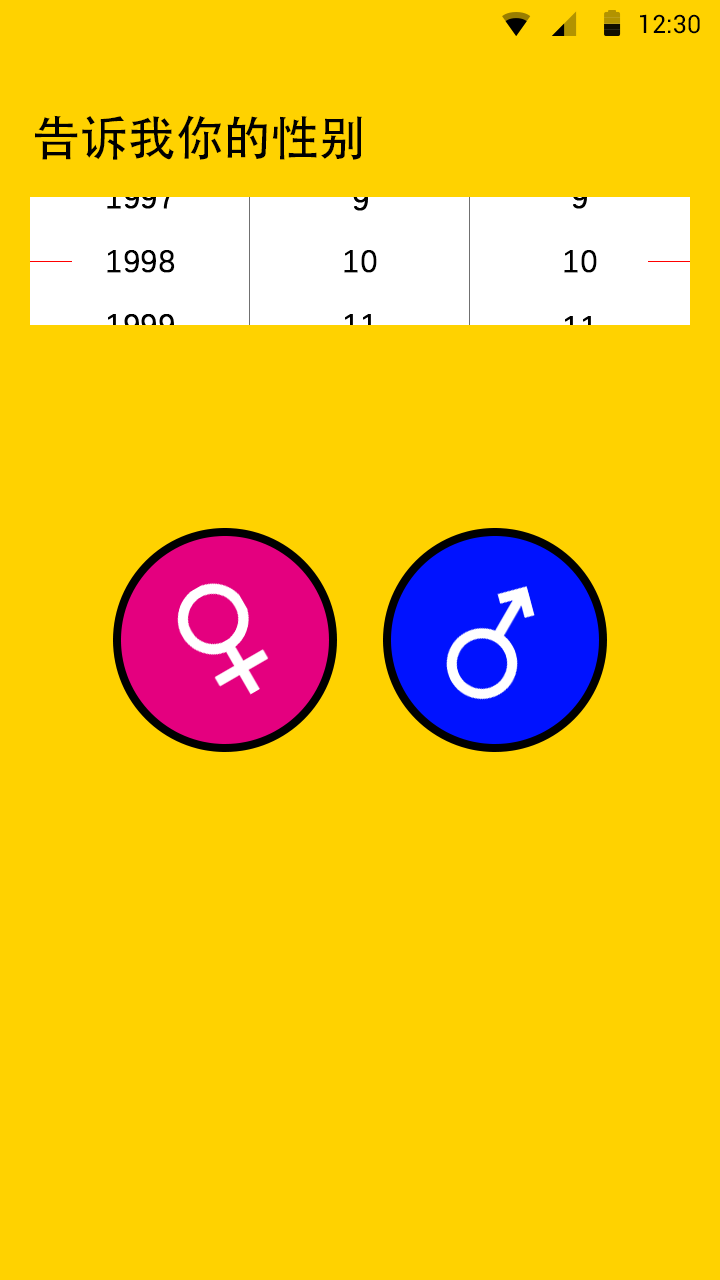
<style>
.page{position:relative;width:720px;height:1280px;background:#ffd200}
.page>*{position:absolute;margin:0}
.t1{font:25.4px "Roboto-Regular";color:#000000}
.t2{font:48px "AdobeHeitiStd-Regular";letter-spacing:-0.004em;color:#000000}
.t3{font:32px "DengXian-Regular";color:#000000;font-weight:bold}
</style>
<div class="page">
<p class="t1" style="left:640px;top:14px;width:60px;height:20px">12:30</p>
<p class="t2" style="left:35px;top:115px;width:327px;height:45px">告诉我你的性别</p>
<p class="t3" style="left:107px;top:250px;width:68px;height:23px">1998</p>
<p class="t3" style="left:344px;top:250px;width:33px;height:23px">10</p>
<p class="t3" style="left:564px;top:250px;width:33px;height:23px">10</p>
</div>
